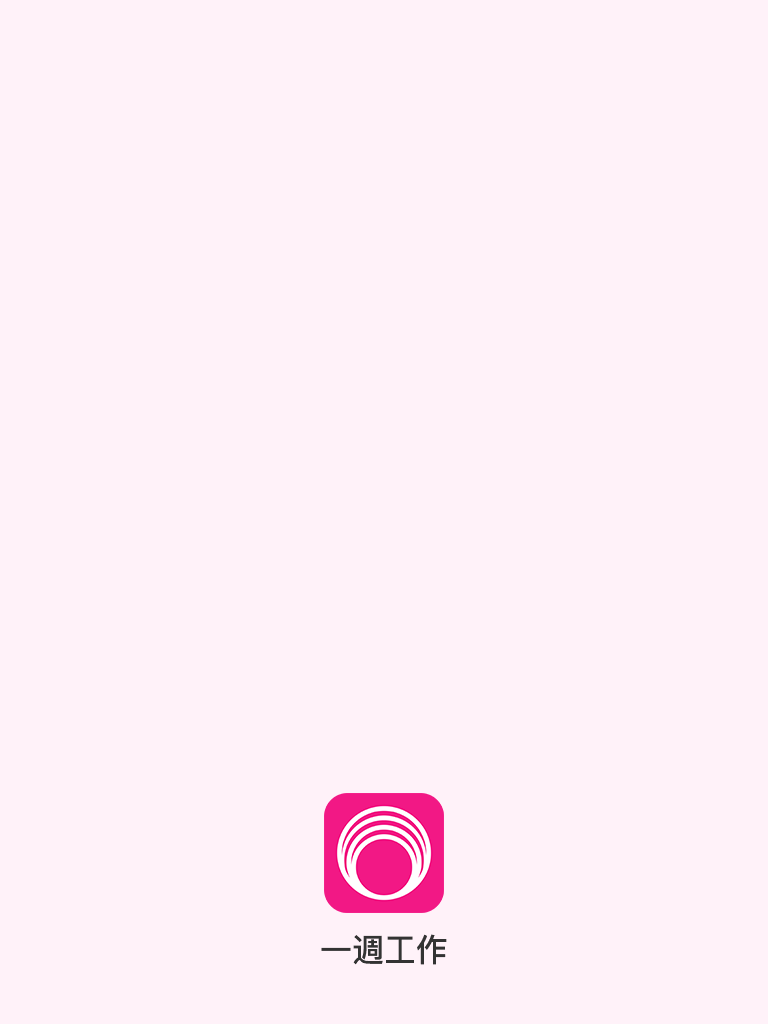
<style>
.page{position:relative;width:768px;height:1024px;background:#fff2f9}
.page>*{position:absolute;margin:0}
.t1{font:32px "PingFang-SC-Bold";color:#333333}
</style>
<div class="page">
<p class="t1" style="left:321px;top:934px;width:126px;height:31px">一週工作</p>
</div>
